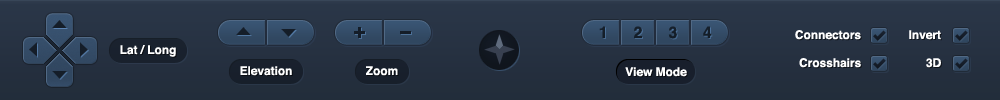
<style>
.page{position:relative;width:1000px;height:100px}
.page>*{position:absolute;margin:0}
.t1{font:16px "Helvetica-Bold";letter-spacing:-0.005em;color:#151f2a;text-transform:uppercase}
.t2{font:16px "Helvetica-Bold";letter-spacing:-0.005em;color:#141e28;text-transform:uppercase}
.t3{font:16px "Helvetica-Bold";letter-spacing:-0.005em;color:#151e2a;text-transform:uppercase}
.t4{font:12px "Helvetica-Bold";letter-spacing:-0.005em;color:#ffffff}
</style>
<div class="page">
<p class="t1" style="left:599px;top:26px;width:6px;height:12px">1</p>
<p class="t2" style="left:634px;top:26px;width:8px;height:12px">2</p>
<p class="t3" style="left:668px;top:26px;width:9px;height:13px">3</p>
<p class="t3" style="left:703px;top:26px;width:9px;height:12px">4</p>
<p class="t4" style="left:795px;top:30px;width:66px;height:10px">Connectors</p>
<p class="t4" style="left:909px;top:30px;width:32px;height:10px">Invert</p>
<p class="t4" style="left:120px;top:45px;width:56px;height:12px">Lat / Long</p>
<p class="t4" style="left:799px;top:58px;width:62px;height:10px">Crosshairs</p>
<p class="t4" style="left:926px;top:58px;width:15px;height:10px">3D</p>
<p class="t4" style="left:240px;top:66px;width:52px;height:10px">Elevation</p>
<p class="t4" style="left:366px;top:66px;width:32px;height:10px">Zoom</p>
<p class="t4" style="left:625px;top:67px;width:62px;height:10px">View Mode</p>
</div>
